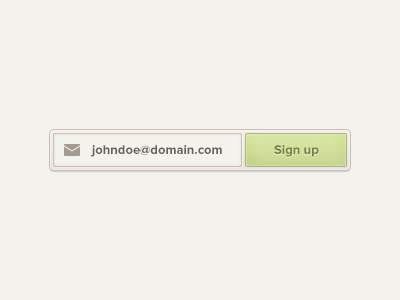
<style>
.page{position:relative;width:400px;height:300px;background:#f4f2ed}
.page>*{position:absolute;margin:0}
.t1{font:13px "ProximaNova-Bold";color:#676059}
.t2{font:13px "ProximaNova-Bold";color:#758247}
</style>
<div class="page">
<p class="t1" style="left:90px;top:145px;width:132px;height:12px">johndoe@domain.com</p>
<p class="t2" style="left:274px;top:145px;width:45px;height:12px">Sign up</p>
</div>
